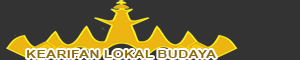
<style>
.page{position:relative;width:300px;height:60px;background:#333333}
.page>*{position:absolute;margin:0}
.t1{font:11.3px "Arial-BoldMT";letter-spacing:0.01em;color:#916c00;scale:1.26 1}
</style>
<div class="page">
<p class="t1" style="left:27px;top:50px;width:189px;height:8px">KEARIFAN LOKAL BUDAYA</p>
</div>
